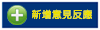
<style>
.page{position:relative;width:100px;height:30px;background:#003479}
.page>*{position:absolute;margin:0}
.t1{font:9.9px "MicrosoftJhengHeiRegular";color:#eadf00;font-weight:bold}
</style>
<div class="page">
<p class="t1" style="left:32px;top:9px;width:60px;height:11px">新增意見反應</p>
<p class="t1" style="left:32px;top:9px;width:60px;height:11px">新增意見反應</p>
</div>
